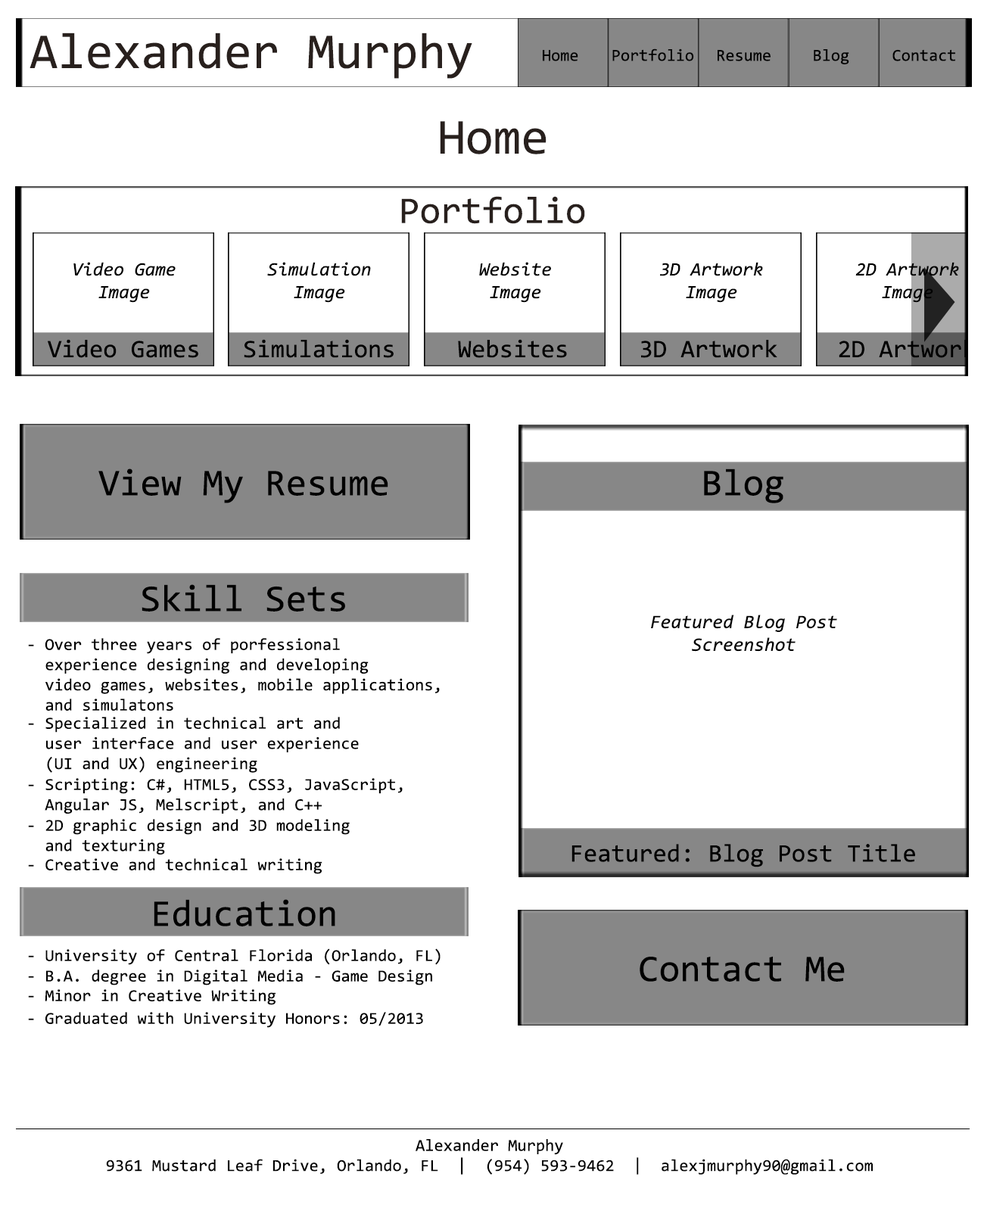
<style>
.page{position:relative;width:984px;height:1211px;background:#ffffff}
.page>*{position:absolute;margin:0}
.t1{font:50.5px "Consolas";color:#28201d}
.t2{font:16.8px "Consolas";color:#000000}
.t3{font:37.9px "Consolas";color:#28201d}
.t4{font:18.9px "Consolas-Italic";color:#000000}
.t5{font:25.2px "Consolas";color:#000000}
.t6{font:37.9px "Consolas";color:#000000}
</style>
<div class="page">
<p class="t1" style="left:30px;top:33px;width:442px;height:46px">Alexander Murphy</p>
<p class="t2" style="left:543px;top:50px;width:35px;height:11px">Home</p>
<p class="t2" style="left:613px;top:48px;width:81px;height:13px">Portfolio</p>
<p class="t2" style="left:718px;top:50px;width:53px;height:11px">Resume</p>
<p class="t2" style="left:814px;top:49px;width:36px;height:15px">Blog</p>
<p class="t2" style="left:893px;top:49px;width:63px;height:12px">Contact</p>
<p class="t1" style="left:440px;top:121px;width:107px;height:33px">Home</p>
<p class="t3" style="left:401px;top:196px;width:184px;height:28px">Portfolio</p>
<p class="t4" style="left:73px;top:262px;width:103px;height:41px;text-align:center">Video Game<br>Image</p>
<p class="t4" style="left:267px;top:262px;width:104px;height:41px;text-align:center">Simulation<br>Image</p>
<p class="t4" style="left:479px;top:262px;width:72px;height:41px;text-align:center">Website<br>Image</p>
<p class="t4" style="left:660px;top:262px;width:103px;height:41px;text-align:center">3D Artwork<br>Image</p>
<p class="t4" style="left:856px;top:262px;width:103px;height:41px;text-align:center">2D Artwork<br>Image</p>
<p class="t5" style="left:48px;top:339px;width:150px;height:19px">Video Games</p>
<p class="t5" style="left:244px;top:339px;width:150px;height:19px">Simulations</p>
<p class="t5" style="left:458px;top:339px;width:109px;height:19px">Websites</p>
<p class="t5" style="left:641px;top:340px;width:137px;height:18px">3D Artwork</p>
<p class="t5" style="left:839px;top:340px;width:137px;height:18px">2D Artwork</p>
<p class="t6" style="left:98px;top:469px;width:290px;height:35px">View My Resume</p>
<p class="t6" style="left:704px;top:469px;width:80px;height:35px">Blog</p>
<p class="t6" style="left:142px;top:585px;width:203px;height:27px">Skill Sets</p>
<p class="t4" style="left:651px;top:615px;width:186px;height:37px;text-align:center">Featured Blog Post<br>Screenshot</p>
<p class="t2" style="left:28px;top:638px;width:412px;height:73px;text-align:right">- Over three years of porfessional <br>  experience designing and developing<br>  video games, websites, mobile applications, <br>  and simulatons</p>
<p class="t2" style="left:28px;top:717px;width:331px;height:56px;text-align:right">- Specialized in technical art and <br>  user interface and user experience<br>  (UI and UX) engineering</p>
<p class="t2" style="left:28px;top:778px;width:375px;height:36px;text-align:right">- Scripting: C#, HTML5, CSS3, JavaScript,<br>  Angular JS, Melscript, and C++</p>
<p class="t2" style="left:28px;top:819px;width:322px;height:36px;text-align:right">- 2D graphic design and 3D modeling <br>  and texturing</p>
<p class="t5" style="left:572px;top:844px;width:343px;height:24px">Featured: Blog Post Title</p>
<p class="t2" style="left:28px;top:859px;width:295px;height:16px">- Creative and technical writing</p>
<p class="t6" style="left:154px;top:900px;width:181px;height:27px">Education</p>
<p class="t2" style="left:28px;top:949px;width:413px;height:16px">- University of Central Florida (Orlando, FL)</p>
<p class="t6" style="left:640px;top:956px;width:205px;height:26px">Contact Me</p>
<p class="t2" style="left:28px;top:970px;width:404px;height:16px">- B.A. degree in Digital Media - Game Design</p>
<p class="t2" style="left:28px;top:990px;width:248px;height:16px">- Minor in Creative Writing</p>
<p class="t2" style="left:28px;top:1012px;width:395px;height:16px">- Graduated with University Honors: 05/2013</p>
<p class="t2" style="left:106px;top:1140px;width:767px;height:35px;text-align:center">Alexander Murphy<br>9361 Mustard Leaf Drive, Orlando, FL  |  (954) 593-9462  |  alexjmurphy90@gmail.com</p>
</div>
